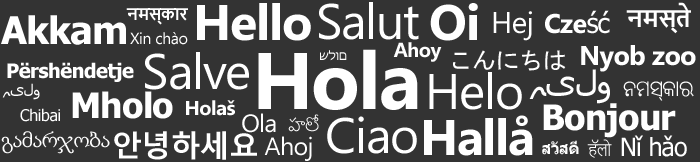
<style>
.page{position:relative;width:700px;height:162px;background:#333333}
.page>*{position:absolute;margin:0}
.t1{font:50px "Ebrima-Bold";letter-spacing:-0.025em;color:#ffffff}
.t2{font:50px "Ebrima";letter-spacing:-0.025em;color:#ffffff}
.t3{font:23px "NirmalaUI-Bold";letter-spacing:-0.025em;color:#ffffff}
.t4{font:38px "Tahoma-Bold";letter-spacing:-0.025em;color:#ffffff}
.t5{font:16px "NirmalaUI-Bold";letter-spacing:-0.025em;color:#ffffff}
.t6{font:30px "Ebrima";letter-spacing:-0.025em;color:#ffffff}
.t7{font:27px "NirmalaUI-Bold";letter-spacing:-0.025em;color:#ffffff}
.t8{font:27px "Tahoma";letter-spacing:-0.025em;color:#ffffff}
.t9{font:16px "Ebrima";letter-spacing:-0.025em;color:#ffffff}
.t10{font:25px "Ebrima";letter-spacing:-0.025em;color:#ffffff}
.t11{font:80px "Ebrima-Bold";letter-spacing:-0.025em;color:#ffffff}
.t12{font:12px "Tahoma";letter-spacing:-0.025em;color:#ffffff}
.t13{font:20px "Ebrima-Bold";letter-spacing:-0.025em;color:#ffffff}
.t14{font:24px "MS-Gothic";letter-spacing:-0.025em;color:#ffffff}
.t15{font:20px "Tahoma-Bold";letter-spacing:-0.025em;color:#ffffff}
.t16{font:35px "Tahoma";letter-spacing:-0.025em;color:#ffffff}
.t17{font:16px "Tahoma";letter-spacing:-0.025em;color:#ffffff}
.t18{font:20px "NirmalaUI-Semilight";letter-spacing:-0.025em;color:#ffffff}
.t19{font:35px "Tahoma-Bold";letter-spacing:-0.025em;color:#ffffff}
.t20{font:16px "NirmalaUI-Semilight";letter-spacing:-0.025em;color:#ffffff}
.t21{font:23px "Sylfaen";letter-spacing:-0.025em;color:#ffffff}
.t22{font:30px "MalgunGothicBold";letter-spacing:-0.025em;color:#ffffff}
.t23{font:25px "Tahoma";letter-spacing:-0.025em;color:#ffffff}
.t24{font:16px "Tahoma-Bold";letter-spacing:-0.025em;color:#ffffff}
</style>
<div class="page">
<p class="t1" style="left:197px;top:3px;width:114px;height:38px">Hello</p>
<p class="t2" style="left:319px;top:2px;width:100px;height:38px">Salut</p>
<p class="t1" style="left:430px;top:3px;width:48px;height:38px">Oi</p>
<p class="t3" style="left:626px;top:2px;width:65px;height:32px">नमस्ते</p>
<p class="t4" style="left:1px;top:15px;width:125px;height:30px">Akkam</p>
<p class="t5" style="left:126px;top:8px;width:62px;height:17px">नमस्कार</p>
<p class="t6" style="left:493px;top:11px;width:39px;height:30px">Hej</p>
<p class="t7" style="left:545px;top:10px;width:65px;height:24px">Cze<span class="t8">ść</span></p>
<p class="t9" style="left:130px;top:32px;width:58px;height:13px"><span class="t10"><br></span>Xin chào</p>
<p class="t2" style="left:145px;top:52px;width:104px;height:38px">Salve</p>
<p class="t11" style="left:258px;top:49px;width:160px;height:61px">Hola</p>
<p class="t12" style="left:320px;top:50px;width:27px;height:11px">שלום</p>
<p class="t13" style="left:393px;top:42px;width:49px;height:20px">Ahoy</p>
<p class="t14" style="left:453px;top:50px;width:113px;height:21px">こんにちは</p>
<p class="t7" style="left:581px;top:45px;width:115px;height:27px">Nyob zoo</p>
<p class="t15" style="left:7px;top:62px;width:127px;height:20px">Përshëndetje</p>
<p class="t2" style="left:429px;top:72px;width:93px;height:38px">Helo</p>
<p class="t16" style="left:529px;top:69px;width:81px;height:35px">ہیلو</p>
<p class="t17" style="left:2px;top:83px;width:38px;height:17px">ہیلو</p>
<p class="t18" style="left:623px;top:81px;width:71px;height:20px">ନମସ୍କାର</p>
<p class="t19" style="left:72px;top:91px;width:101px;height:28px">Mholo</p>
<p class="t13" style="left:186px;top:100px;width:49px;height:16px">Holaš</p>
<p class="t17" style="left:20px;top:108px;width:40px;height:14px">Chibai</p>
<p class="t10" style="left:242px;top:113px;width:34px;height:20px">Ola</p>
<p class="t19" style="left:543px;top:103px;width:133px;height:35px">Bonjour</p>
<p class="t20" style="left:288px;top:114px;width:31px;height:18px">హలో</p>
<p class="t2" style="left:327px;top:116px;width:90px;height:38px">Ciao</p>
<p class="t1" style="left:424px;top:115px;width:109px;height:41px">Hallå</p>
<p class="t21" style="left:1px;top:131px;width:109px;height:23px">გამარჯობა</p>
<p class="t22" style="left:114px;top:131px;width:143px;height:29px">안녕하세요</p>
<p class="t10" style="left:264px;top:136px;width:48px;height:25px">Ahoj</p>
<p class="t23" style="left:621px;top:135px;width:66px;height:22px">Nǐ hǎo</p>
<p class="t24" style="left:542px;top:140px;width:37px;height:15px">สวัสดี</p>
<p class="t20" style="left:587px;top:139px;width:25px;height:19px">हॅलो</p>
</div>
